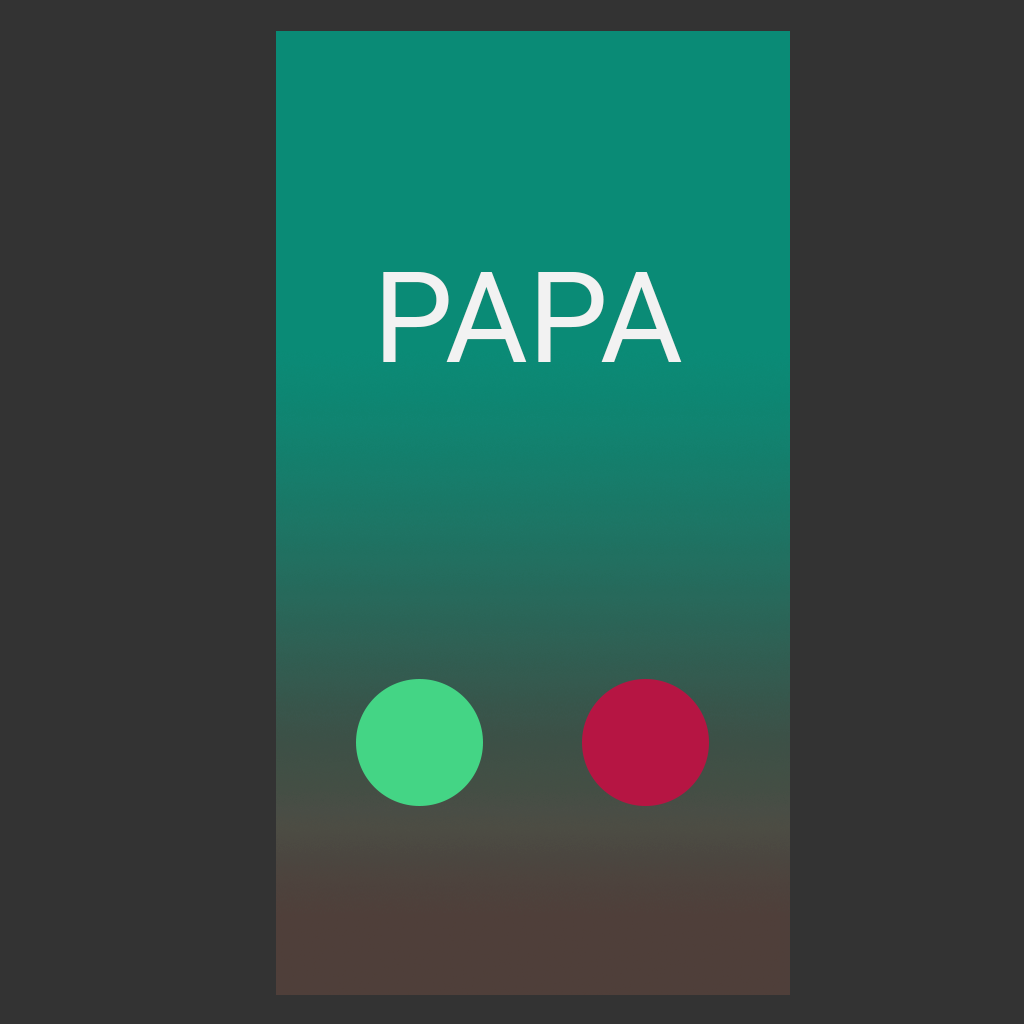
<style>
.page{position:relative;width:1024px;height:1024px;background:#333333}
.page>*{position:absolute;margin:0}
.t1{font:126.9px "Roboto-Regular";color:#f2f2f2}
</style>
<div class="page">
<p class="t1" style="left:383px;top:272px;width:299px;height:90px">PAPA</p>
</div>
